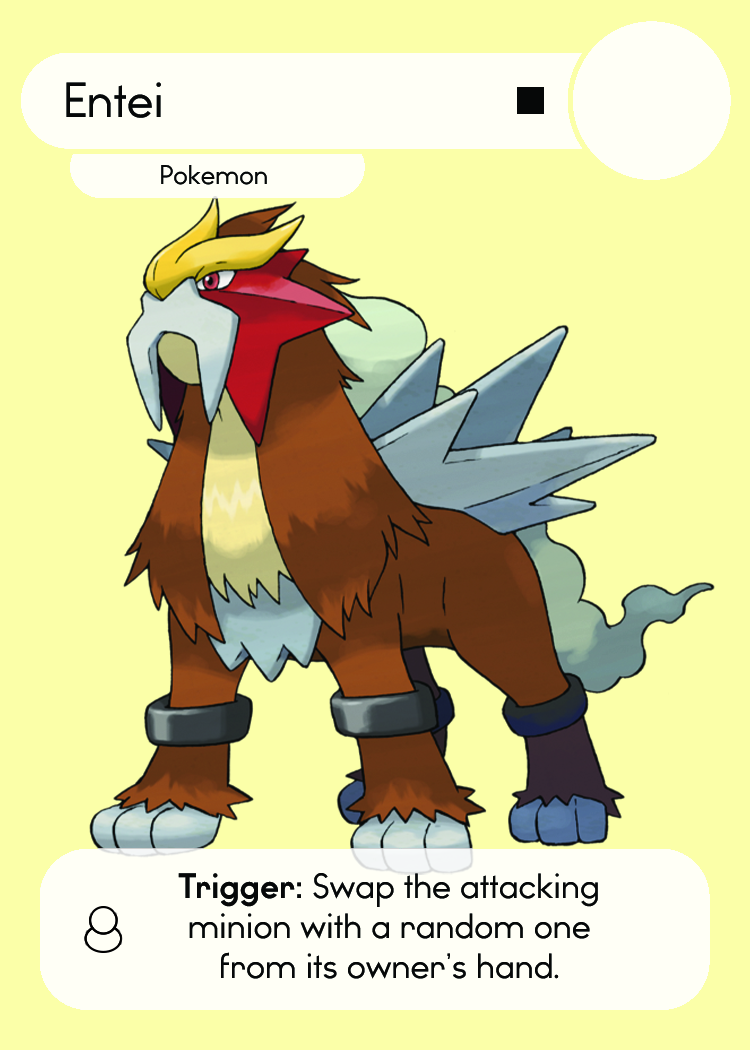
<style>
.page{position:relative;width:750px;height:1050px;background:#fbffa8}
.page>*{position:absolute;margin:0}
.t1{font:46.7px "WatchwordRegularDemo";color:#060808}
.t2{font:25.5px "WatchwordRegularDemo";color:#060808}
.t3{font:33.3px "WatchwordRegularDemo";color:#060808}
.t4{font:33.3px "WatchwordBoldDemo";color:#060808}
.t5{font:33.3px "Dosis-Medium";color:#060808}
</style>
<div class="page">
<p class="t1" style="left:66px;top:82px;width:95px;height:36px">Entei</p>
<p class="t2" style="left:161px;top:165px;width:106px;height:20px">Pokemon</p>
<p class="t3" style="left:178px;top:873px;width:420px;height:106px;text-align:center"><span class="t4">Trigger: </span>Swap the attacking<br>minion with a random one<br>from its owner’s hand<span class="t5">.</span></p>
</div>
